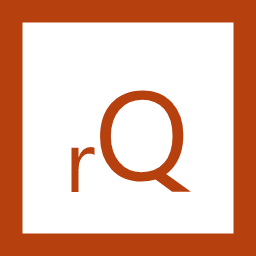
<style>
.page{position:relative;width:256px;height:256px;background:#ffffff}
.page>*{position:absolute;margin:0}
.t1{font:125.8px "SegoeUI";color:#b7410e}
.t2{font:88.3px "SegoeUI";color:#b7410e}
</style>
<div class="page">
<p class="t1" style="left:100px;top:90px;width:91px;height:102px">Q</p>
<p class="t2" style="left:71px;top:147px;width:24px;height:45px">r</p>
</div>
